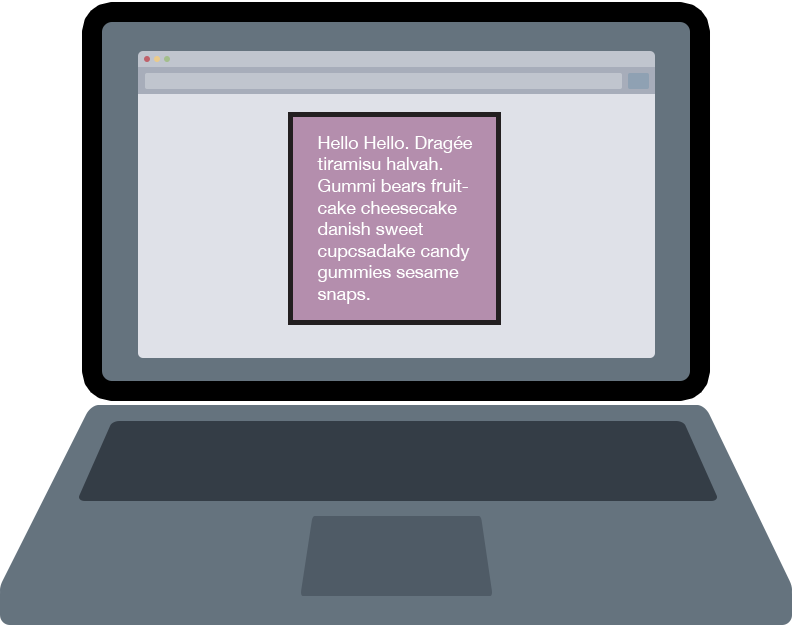
<style>
.page{position:relative;width:792px;height:625px;background:#65737e}
.page>*{position:absolute;margin:0}
.t1{font:18px "HelveticaNeue";color:#ffffff}
</style>
<div class="page">
<p class="t1" style="left:317px;top:136px;width:156px;height:168px">Hello Hello. Dragée tiramisu halvah. Gummi bears fruitcake cheesecake danish sweet cupcsadake candy gummies sesame snaps.</p>
</div>
